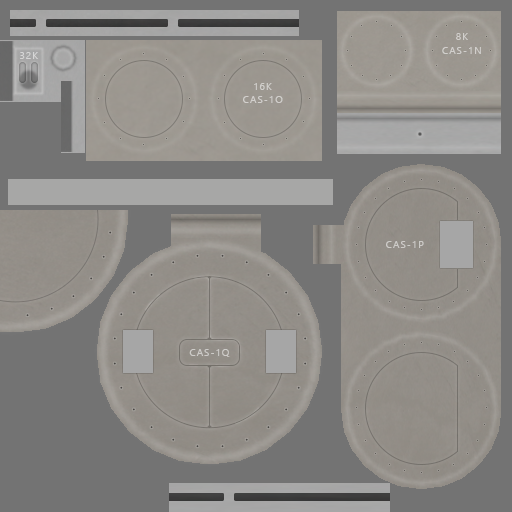
<style>
.page{position:relative;width:512px;height:512px;background:#737373}
.page>*{position:absolute;margin:0}
.t1{font:10px "SegoeUI";letter-spacing:0.1em;color:#d1cfcc}
.t2{font:10px "SegoeUI";letter-spacing:0.1em;color:#d6d6d6}
.t3{font:10px "SegoeUI";letter-spacing:0.1em;color:#cdccc9}
</style>
<div class="page">
<p class="t1" style="left:456px;top:33px;width:12px;height:7px">8K</p>
<p class="t2" style="left:20px;top:52px;width:18px;height:7px">32K</p>
<p class="t1" style="left:442px;top:47px;width:39px;height:7px">CAS-1N</p>
<p class="t1" style="left:254px;top:83px;width:18px;height:7px">16K</p>
<p class="t1" style="left:243px;top:96px;width:40px;height:7px">CAS-1O</p>
<p class="t3" style="left:386px;top:241px;width:38px;height:7px">CAS-1P</p>
<p class="t3" style="left:189px;top:349px;width:41px;height:8px">CAS-1Q</p>
</div>
